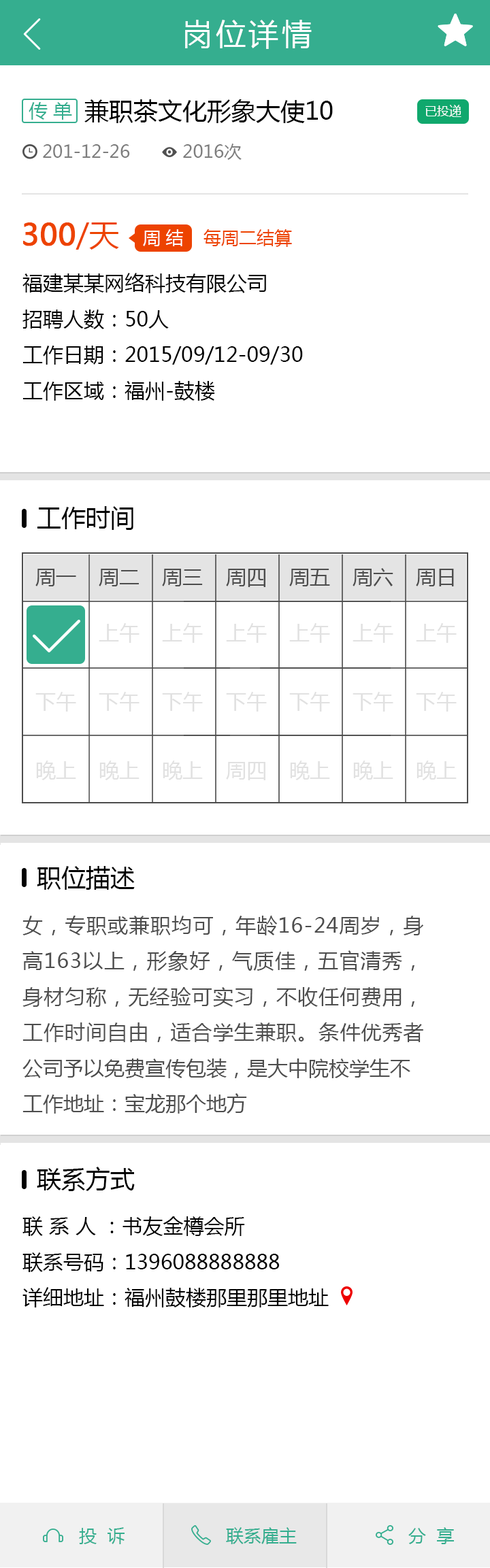
<style>
.page{position:relative;width:490px;height:1568px;background:#ffffff}
.page>*{position:absolute;margin:0}
.t1{font:29.9px "MicrosoftYaHei";letter-spacing:0.1em;color:#ffffff}
.t2{font:24.5px "MicrosoftYaHei";color:#000000}
.t3{font:19px "MicrosoftYaHei";color:#35ae8f}
.t4{font:12.2px "MicrosoftYaHei";color:#ffffff}
.t5{font:17.7px "MicrosoftYaHei";color:#7e7e7e}
.t6{font:29.9px "MicrosoftYaHei";color:#ed4300;font-weight:bold}
.t7{font:29.9px "MicrosoftYaHei";color:#ed4300}
.t8{font:17.7px "MicrosoftYaHei";color:#ffffff}
.t9{font:17.7px "MicrosoftYaHei";color:#ed4300}
.t10{font:20.4px "MicrosoftYaHei";color:#000000}
.t11{font:20.4px "MicrosoftYaHei";color:#4d4d4d}
.t12{font:17.7px "MicrosoftYaHei";color:#35ae8f}
</style>
<div class="page">
<p class="t1" style="left:185px;top:20px;width:127px;height:29px">岗位详情</p>
<p class="t2" style="left:84px;top:99px;width:249px;height:24px">兼职茶文化形象大使10</p>
<p class="t3" style="left:29px;top:102px;width:43px;height:18px">传 单</p>
<p class="t4" style="left:425px;top:105px;width:36px;height:12px">已投递</p>
<p class="t5" style="left:43px;top:144px;width:198px;height:16px">201-12-26          2016次</p>
<p class="t6" style="left:23px;top:222px;width:96px;height:28px">300<span class="t7">/天</span></p>
<p class="t8" style="left:143px;top:229px;width:40px;height:17px">周 结</p>
<p class="t9" style="left:203px;top:229px;width:89px;height:18px">每周二结算</p>
<p class="t10" style="left:22px;top:273px;width:281px;height:128px">福建某某网络科技有限公司<br>招聘人数：50人<br>工作日期：2015/09/12-09/30<br>工作区域：福州-鼓楼</p>
<p class="t2" style="left:37px;top:506px;width:96px;height:24px">工作时间</p>
<p class="t11" style="left:35px;top:569px;width:41px;height:17px">周一</p>
<p class="t11" style="left:99px;top:569px;width:40px;height:17px">周二</p>
<p class="t11" style="left:162px;top:569px;width:41px;height:17px">周三</p>
<p class="t11" style="left:226px;top:569px;width:39px;height:18px">周四</p>
<p class="t11" style="left:289px;top:569px;width:41px;height:17px">周五</p>
<p class="t11" style="left:352px;top:568px;width:41px;height:18px">周六</p>
<p class="t11" style="left:416px;top:569px;width:38px;height:17px">周日</p>
<p class="t2" style="left:37px;top:866px;width:98px;height:24px">职位描述</p>
<p class="t11" style="left:22px;top:916px;width:401px;height:198px;text-align:justify">女，专职或兼职均可，年龄16-24周岁，身高163以上，形象好，气质佳，五官清秀，身材匀称，无经验可实习，不收任何费用，工作时间自由，适合学生兼职。条件优秀者公司予以免费宣传包装，是大中院校学生不<br>工作地址：宝龙那个地方</p>
<p class="t2" style="left:37px;top:1167px;width:98px;height:24px">联系方式</p>
<p class="t10" style="left:22px;top:1216px;width:307px;height:91px">联 系 人 ：书友金樽会所<br>联系号码：1396088888888<br>详细地址：福州鼓楼那里那里地址</p>
<p class="t12" style="left:79px;top:1527px;width:45px;height:17px">投  诉</p>
<p class="t12" style="left:79px;top:1527px;width:45px;height:17px">投  诉</p>
<p class="t12" style="left:226px;top:1527px;width:71px;height:17px">联系雇主</p>
<p class="t12" style="left:408px;top:1527px;width:46px;height:17px">分  享</p>
<p class="t12" style="left:408px;top:1527px;width:46px;height:17px">分  享</p>
</div>
